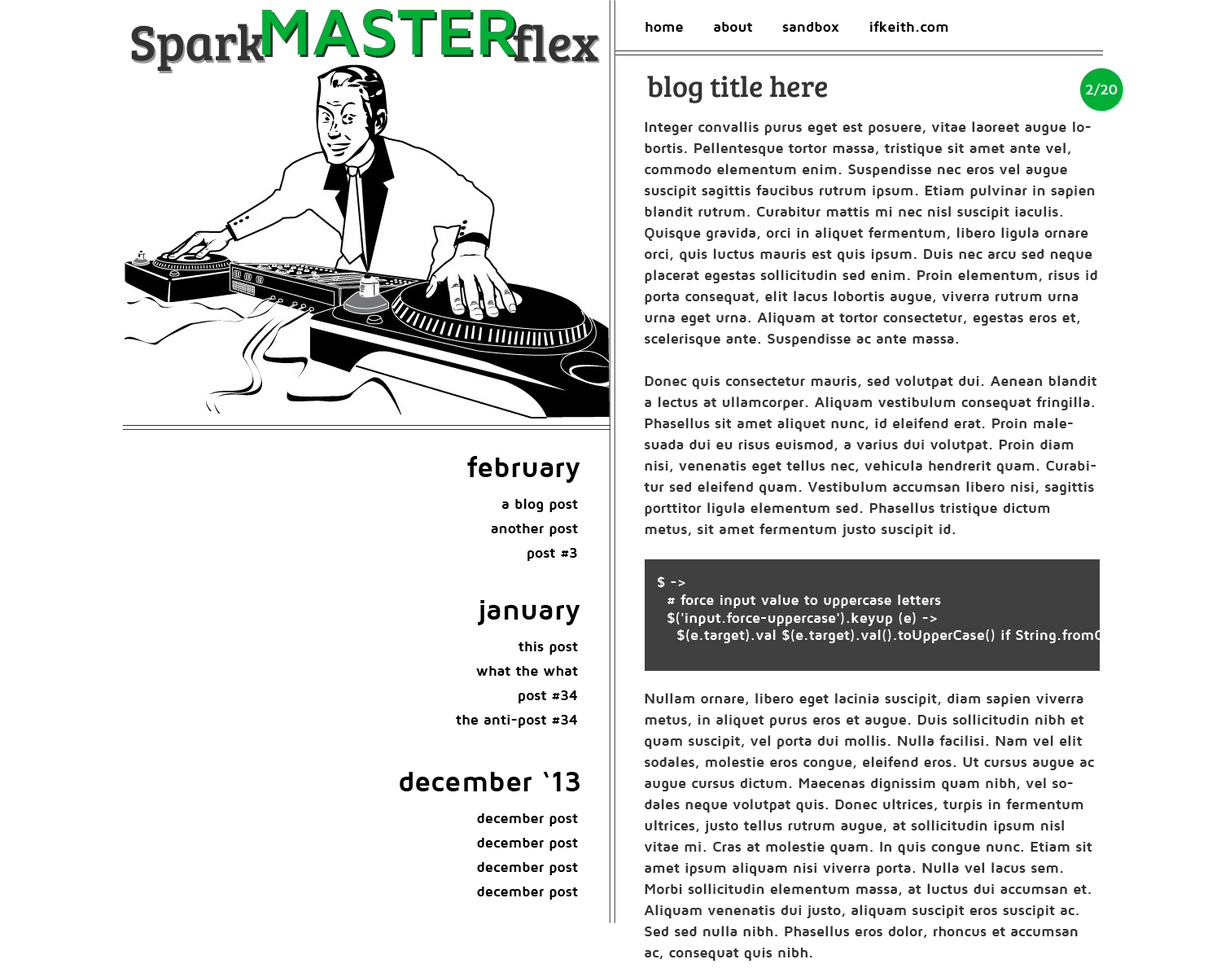
<style>
.page{position:relative;width:1221px;height:977px;background:#ffffff}
.page>*{position:absolute;margin:0}
.t1{font:66.6px "MavenProBold";color:#00af36}
.t2{font:51px "BreeSerif-Regular";color:#333333}
.t3{font:51px "BreeSerif-Regular"}
.t4{font:14.7px "MavenProBold";color:#000000}
.t5{font:29.3px "BreeSerif-Regular";color:#333333}
.t6{font:14.7px "MavenProBold";color:#fefefe}
.t7{font:14.7px/21.2px "MavenProBold";color:#333333}
.t8{font:29.3px "MavenProBold";color:#000000}
.t9{font:14.7px/24.4px "MavenProBold";color:#000000}
</style>
<div class="page">
<p class="t1" style="left:262px;top:9px;width:254px;height:46px">MASTER</p>
<p class="t1" style="left:265px;top:11px;width:253px;height:47px">MASTER</p>
<p class="t2" style="left:131px;top:24px;width:133px;height:47px">Spark</p>
<p class="t3" style="left:133px;top:26px;width:132px;height:47px">Spark</p>
<p class="t2" style="left:513px;top:24px;width:85px;height:38px">flex</p>
<p class="t3" style="left:514px;top:25px;width:86px;height:38px">flex</p>
<p class="t4" style="left:645px;top:21px;width:303px;height:11px">home      about      sandbox      ifkeith.com</p>
<p class="t5" style="left:647px;top:76px;width:181px;height:27px">blog title here</p>
<p class="t6" style="left:1086px;top:83px;width:32px;height:13px">2/20</p>
<p class="t7" style="left:644px;top:121px;width:453px;height:839px">Integer convallis purus eget est posuere, vitae laoreet augue lobortis. Pellentesque tortor massa, tristique sit amet ante vel, commodo elementum enim. Suspendisse nec eros vel augue suscipit sagittis faucibus rutrum ipsum. Etiam pulvinar in sapien blandit rutrum. Curabitur mattis mi nec nisl suscipit iaculis. Quisque gravida, orci in aliquet fermentum, libero ligula ornare orci, quis luctus mauris est quis ipsum. Duis nec arcu sed neque placerat egestas sollicitudin sed enim. Proin elementum, risus id porta consequat, elit lacus lobortis augue, viverra rutrum urna urna eget urna. Aliquam at tortor consectetur, egestas eros et, scelerisque ante. Suspendisse ac ante massa.<br><br>Donec quis consectetur mauris, sed volutpat dui. Aenean blandit a lectus at ullamcorper. Aliquam vestibulum consequat fringilla. Phasellus sit amet aliquet nunc, id eleifend erat. Proin malesuada dui eu risus euismod, a varius dui volutpat. Proin diam nisi, venenatis eget tellus nec, vehicula hendrerit quam. Curabitur sed eleifend quam. Vestibulum accumsan libero nisi, sagittis porttitor ligula elementum sed. Phasellus tristique dictum metus, sit amet fermentum justo suscipit id.<br><br><br><br><br><br><br><br>Nullam ornare, libero eget lacinia suscipit, diam sapien viverra metus, in aliquet purus eros et augue. Duis sollicitudin nibh et quam suscipit, vel porta dui mollis. Nulla facilisi. Nam vel elit sodales, molestie eros congue, eleifend eros. Ut cursus augue ac augue cursus dictum. Maecenas dignissim quam nibh, vel sodales neque volutpat quis. Donec ultrices, turpis in fermentum ultrices, justo tellus rutrum augue, at sollicitudin ipsum nisl vitae mi. Cras at molestie quam. In quis congue nunc. Etiam sit amet ipsum aliquam nisi viverra porta. Nulla vel lacus sem. Morbi sollicitudin elementum massa, at luctus dui accumsan et. Aliquam venenatis dui justo, aliquam suscipit eros suscipit ac. Sed sed nulla nibh. Phasellus eros dolor, rhoncus et accumsan ac, consequat quis nibh.</p>
<p class="t8" style="left:467px;top:456px;width:113px;height:27px">february</p>
<p class="t9" style="left:491px;top:498px;width:87px;height:63px;text-align:right">a blog post<br>another post<br>post #3</p>
<p class="t8" style="left:478px;top:600px;width:102px;height:25px">january</p>
<p class="t9" style="left:456px;top:641px;width:122px;height:87px;text-align:right">this post<br>what the what<br>post #34<br>the anti-post #34</p>
<p class="t8" style="left:400px;top:772px;width:180px;height:19px">december ‘13</p>
<p class="t9" style="left:477px;top:813px;width:101px;height:86px;text-align:right">december post<br>december post<br>december post<br>december post</p>
</div>
